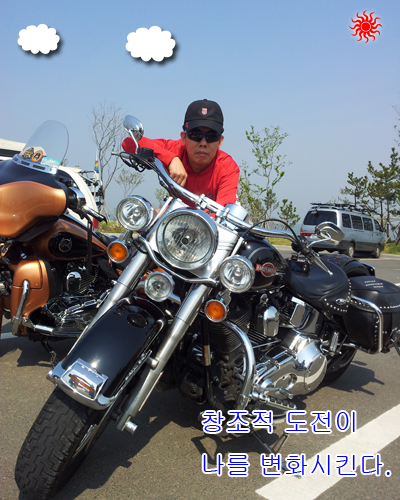
<style>
.page{position:relative;width:400px;height:500px}
.page>*{position:absolute;margin:0}
.t1{font:25px "Gulim";color:#0000ff}
</style>
<div class="page">
<p class="t1" style="left:203px;top:412px;width:187px;height:63px">창조적 도전이<br>나를 변화시킨다.</p>
</div>
